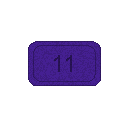
<style>
.page{position:relative;width:128px;height:128px;background:#ffffff}
.page>*{position:absolute;margin:0}
.t1{font:24px "ArialMT";color:#281355}
</style>
<div class="page">
<p class="t1" style="left:54px;top:55px;width:18px;height:17px">11</p>
</div>
